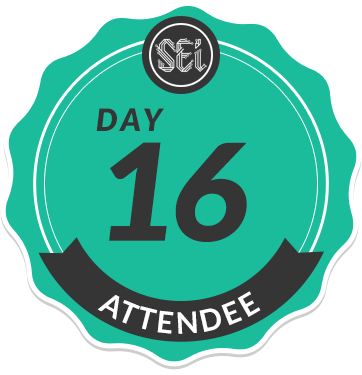
<style>
.page{position:relative;width:362px;height:375px;background:#1abc9c}
.page>*{position:absolute;margin:0}
.t1{font:30.6px/110px "Lato-BlackItalic";letter-spacing:0.14em;color:#353535}
.t2{font:134.6px/110px "Lato-BlackItalic";letter-spacing:-0.02em;color:#353535}
.t3{font:29.7px "Lato-Bold";letter-spacing:0.1em;color:#ffffff}
</style>
<div class="page">
<p class="t1" style="left:96px;top:108px;width:151px;height:134px">DAY<br><span class="t2">16</span></p>
<p class="t3" style="left:97px;top:291px;width:164px;height:43px">ATTENDEE</p>
</div>
